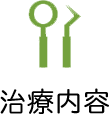
<style>
.page{position:relative;width:109px;height:114px;background:#ffffff}
.page>*{position:absolute;margin:0}
.t1{font:28px "TBChibiRGoPlusKPro-Regular";color:#000000}
</style>
<div class="page">
<p class="t1" style="left:0px;top:88px;width:109px;height:26px">治療内容</p>
</div>
